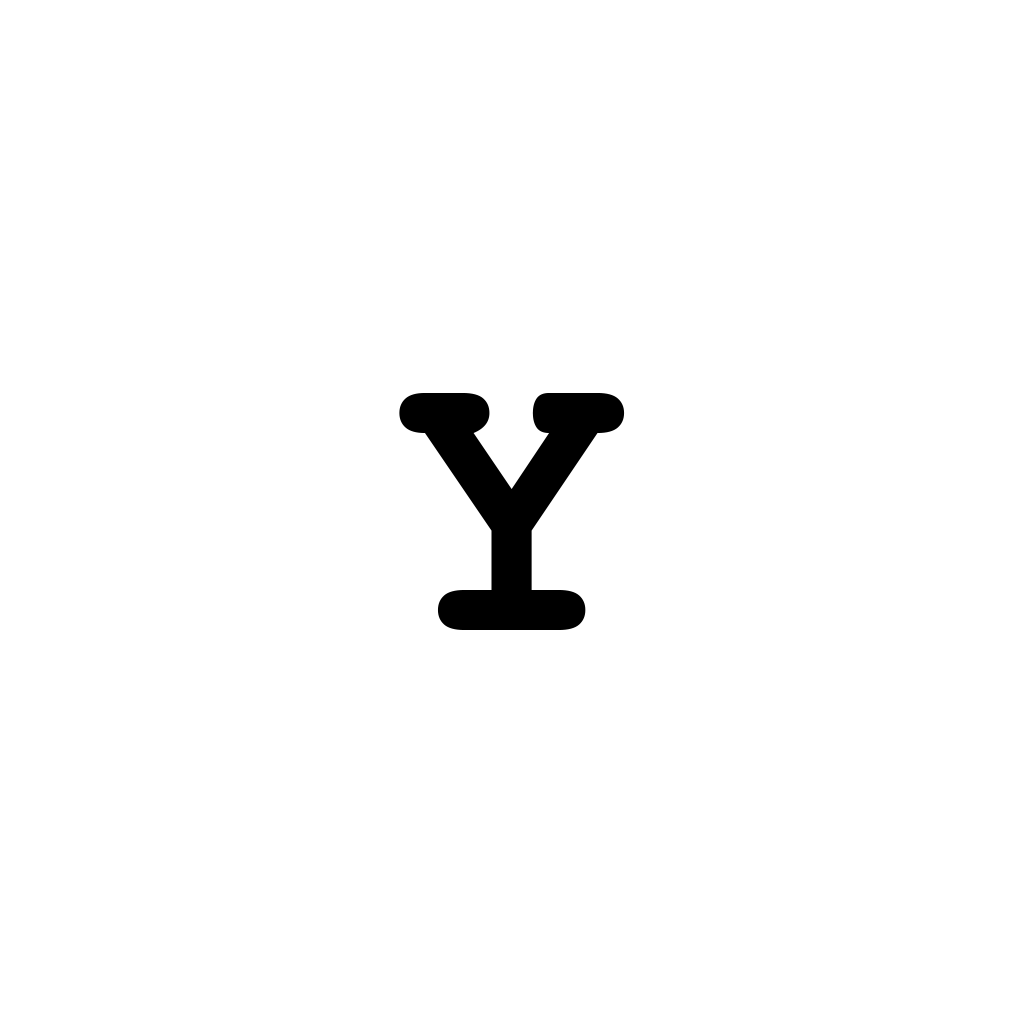
<style>
.page{position:relative;width:1024px;height:1024px;background:#ffffff}
.page>*{position:absolute;margin:0}
.t1{font:400px "CourierNewPS-BoldMT";color:#000000}
</style>
<div class="page">
<p class="t1" style="left:399px;top:393px;width:226px;height:237px">Y</p>
</div>
